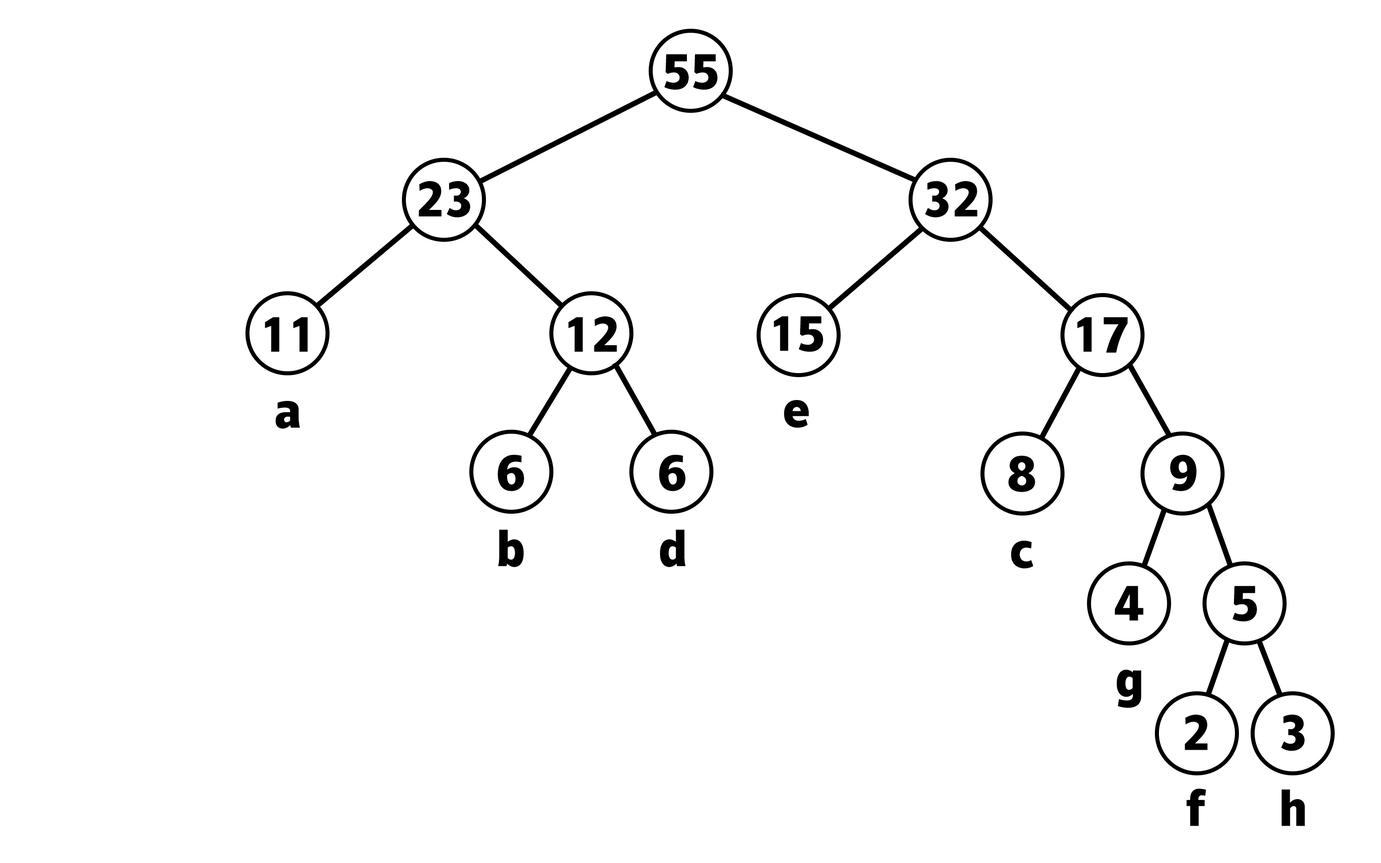
<style>
.page{position:relative;width:1381px;height:863px;background:#ffffff}
.page>*{position:absolute;margin:0}
.t1{font:43.5px "HYYaKuHeiJ";color:#000000}
</style>
<div class="page">
<p class="t1" style="left:664px;top:54px;width:54px;height:36px">55</p>
<p class="t1" style="left:419px;top:181px;width:51px;height:37px">23</p>
<p class="t1" style="left:925px;top:181px;width:52px;height:37px">32</p>
<p class="t1" style="left:265px;top:317px;width:43px;height:112px;text-align:center">11<br>a</p>
<p class="t1" style="left:568px;top:316px;width:49px;height:36px">12</p>
<p class="t1" style="left:774px;top:316px;width:49px;height:112px;text-align:center">15<br>e</p>
<p class="t1" style="left:1077px;top:317px;width:51px;height:36px">17</p>
<p class="t1" style="left:498px;top:455px;width:26px;height:112px;text-align:center">6<br>b</p>
<p class="t1" style="left:659px;top:455px;width:27px;height:112px;text-align:center">6<br>d</p>
<p class="t1" style="left:1009px;top:455px;width:26px;height:114px;text-align:center">8<br>c</p>
<p class="t1" style="left:1170px;top:455px;width:27px;height:36px">9</p>
<p class="t1" style="left:1115px;top:586px;width:29px;height:122px;text-align:center">4<br>g</p>
<p class="t1" style="left:1232px;top:586px;width:25px;height:36px">5</p>
<p class="t1" style="left:1185px;top:714px;width:23px;height:112px;text-align:center">2<br>f</p>
<p class="t1" style="left:1281px;top:714px;width:24px;height:112px;text-align:center">3<br>h</p>
</div>
